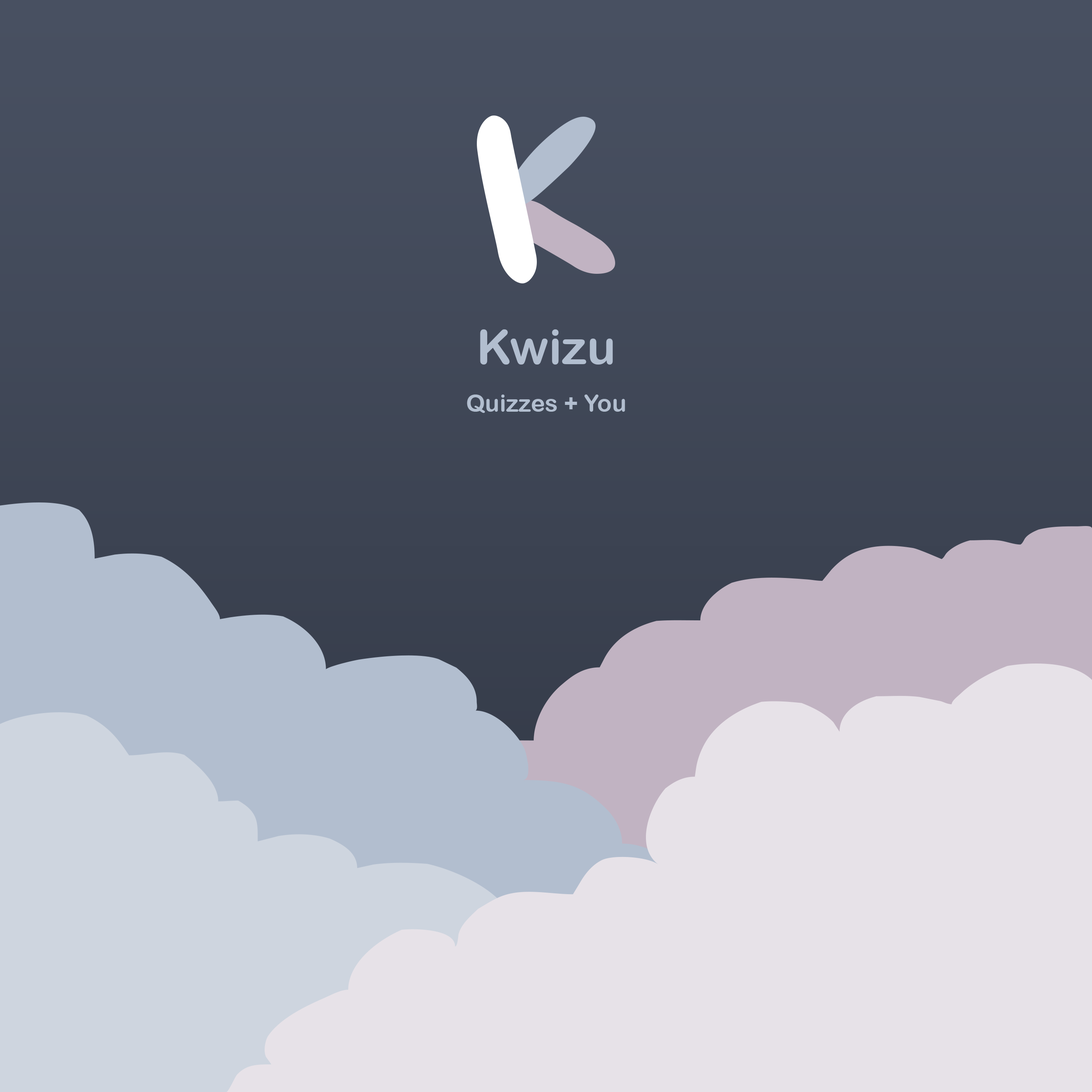
<style>
.page{position:relative;width:1092px;height:1092px}
.page>*{position:absolute;margin:0}
.t1{font:48px "ArialRoundedMTBold";color:#b2becf}
.t2{font:24px "ArialRoundedMTBold";color:#b2becf}
</style>
<div class="page">
<p class="t1" style="left:480px;top:329px;width:133px;height:36px">Kwizu</p>
<p class="t2" style="left:467px;top:395px;width:158px;height:18px">Quizzes + You</p>
</div>
